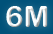
<style>
.page{position:relative;width:53px;height:34px}
.page>*{position:absolute;margin:0}
.t1{font:29.5px "ArialRoundedMTBold";color:#fafdfe;scale:1.04 1}
</style>
<div class="page">
<p class="t1" style="left:6px;top:6px;width:42px;height:21px">6M</p>
</div>
